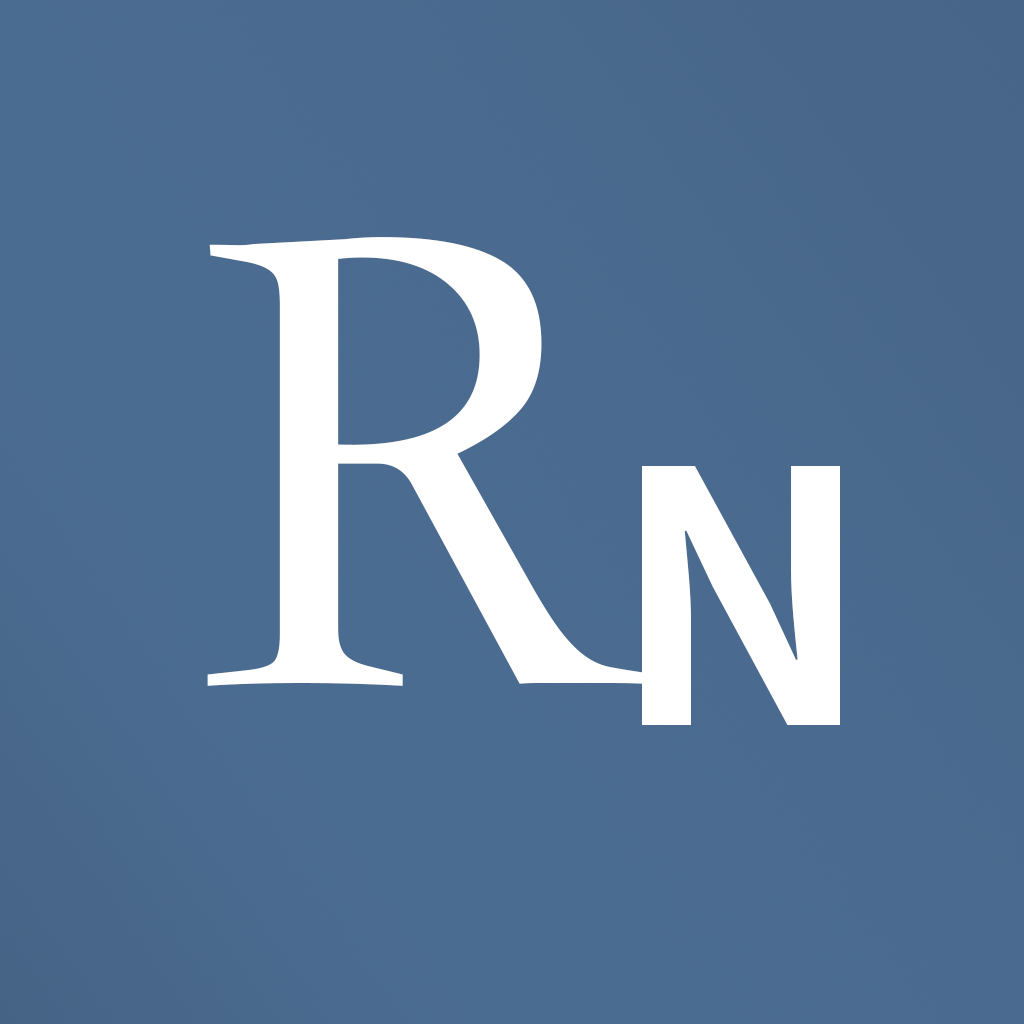
<style>
.page{position:relative;width:1024px;height:1024px}
.page>*{position:absolute;margin:0}
.t1{font:701px "STSong";color:#ffffff}
.t2{font:350.5px "SourceHanSansSC-Bold";color:#ffffff}
</style>
<div class="page">
<p class="t1" style="left:207px;top:237px;width:436px;height:449px">R</p>
<p class="t2" style="left:642px;top:466px;width:198px;height:259px">N</p>
</div>
